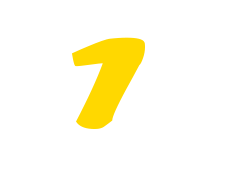
<style>
.page{position:relative;width:227px;height:170px;background:#ffffff}
.page>*{position:absolute;margin:0}
.t1{font:131.1px "ComicBook";color:#ffd800;scale:2.2 1}
</style>
<div class="page">
<p class="t1" style="left:72px;top:37px;width:73px;height:92px">1</p>
</div>
